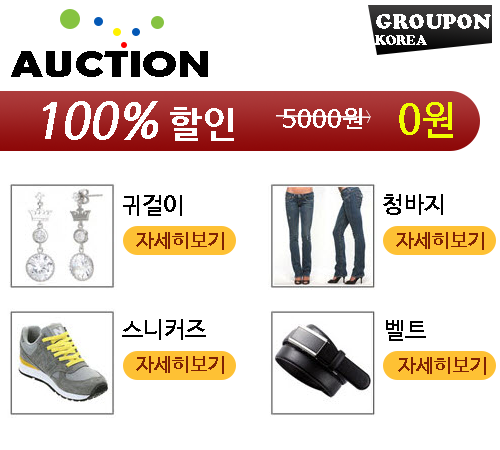
<style>
.page{position:relative;width:500px;height:450px;background:#ffffff}
.page>*{position:absolute;margin:0}
.t1{font:20px "CooperBlackStd";color:#fefefe}
.t2{font:13px "CooperBlackStd";color:#fefefe}
.t3{font:38.2px "BerlinSansFBDemi-Bold";color:#000000;scale:1.21 1}
.t4{font:48px "NanumBarunGothicBold";color:#ffffff;font-style:italic}
.t5{font:38px "NanumBarunGothicBold";color:#ffffff}
.t6{font:40px "NanumBarunGothicBold";color:#f0ff00}
.t7{font:25px "NanumBarunGothicBold";color:#ffffff}
.t8{font:24px "NanumBarunGothicBold";color:#000000}
.t9{font:20px "NanumBarunGothicBold";color:#7f2203}
</style>
<div class="page">
<p class="t1" style="left:375px;top:14px;width:116px;height:31px">GROUPON<br><span class="t2">KOREA</span></p>
<p class="t3" style="left:11px;top:51px;width:197px;height:26px">AUCTION</p>
<p class="t4" style="left:43px;top:101px;width:191px;height:40px">100%<span class="t5"> 할인</span></p>
<p class="t6" style="left:399px;top:102px;width:54px;height:36px">0원</p>
<p class="t7" style="left:283px;top:108px;width:79px;height:21px">5000원</p>
<p class="t8" style="left:123px;top:195px;width:59px;height:21px">귀걸이</p>
<p class="t8" style="left:383px;top:194px;width:60px;height:21px">청바지</p>
<p class="t9" style="left:136px;top:232px;width:88px;height:18px">자세히보기</p>
<p class="t9" style="left:396px;top:232px;width:88px;height:18px">자세히보기</p>
<p class="t8" style="left:122px;top:319px;width:84px;height:21px">스니커즈</p>
<p class="t8" style="left:386px;top:320px;width:40px;height:21px">벨트</p>
<p class="t9" style="left:136px;top:356px;width:88px;height:18px">자세히보기</p>
<p class="t9" style="left:398px;top:357px;width:88px;height:18px">자세히보기</p>
</div>
